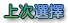
<style>
.page{position:relative;width:68px;height:23px;background:#ffffff}
.page>*{position:absolute;margin:0}
.t1{font:14px "MicrosoftYaHeiUI";letter-spacing:0.05em;font-weight:bold}
</style>
<div class="page">
<p class="t1" style="left:4px;top:4px;width:30px;height:15px">上次</p>
<p class="t1" style="left:34px;top:4px;width:30px;height:14px">選擇</p>
</div>
